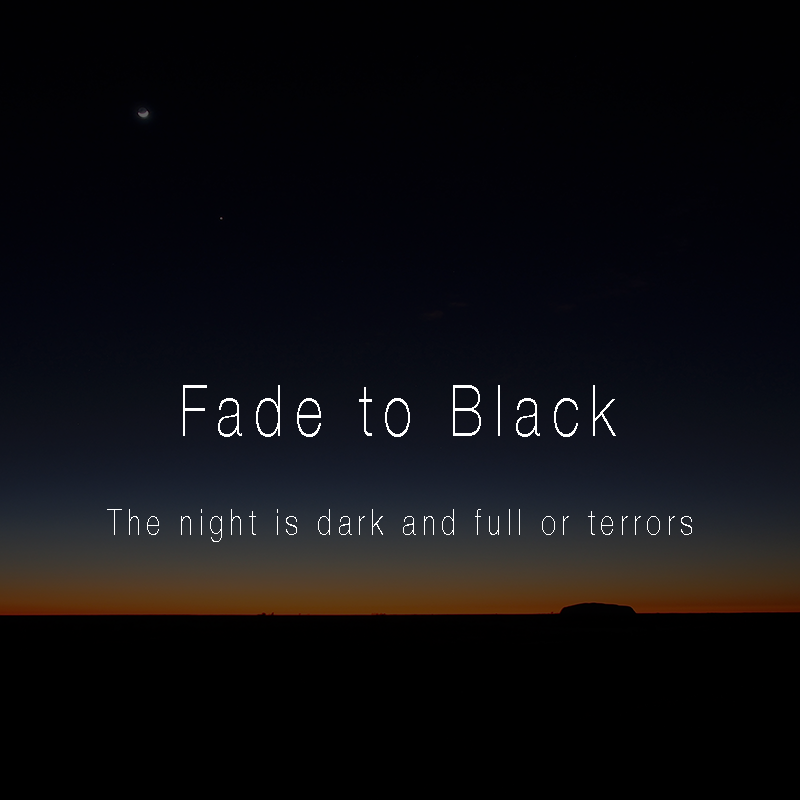
<style>
.page{position:relative;width:800px;height:800px;background:#000000}
.page>*{position:absolute;margin:0}
.t1{font:72px "HelveticaNeue-Thin";letter-spacing:0.2em;color:#ffffff;scale:0.75 1}
.t2{font:36px "HelveticaNeue-Thin";letter-spacing:0.2em;color:#ffffff;scale:0.75 1}
</style>
<div class="page">
<p class="t1" style="left:183px;top:385px;width:433px;height:52px">Fade to Black</p>
<p class="t2" style="left:107px;top:509px;width:585px;height:33px">The night is dark and full or terrors</p>
</div>
